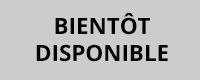
<style>
.page{position:relative;width:200px;height:80px;background:#cccccc}
.page>*{position:absolute;margin:0}
.t1{font:22.4px "OpenSans-Bold";color:#000000;text-transform:uppercase}
</style>
<div class="page">
<p class="t1" style="left:36px;top:13px;width:132px;height:49px;text-align:center">Bientôt<br>disponible</p>
</div>
